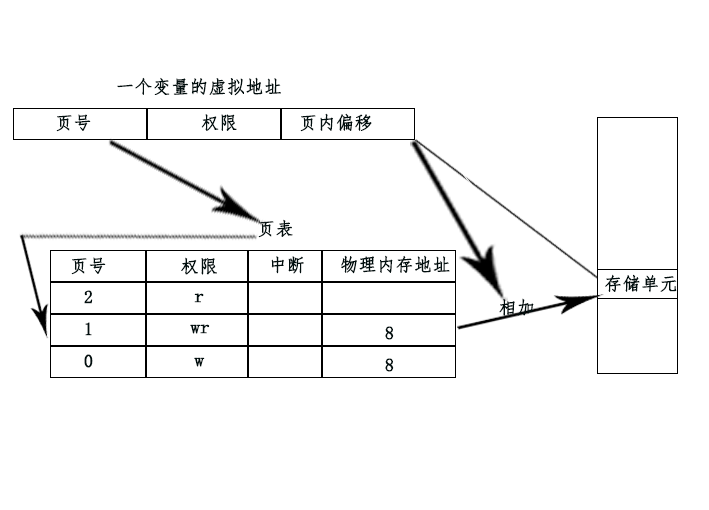
<style>
.page{position:relative;width:709px;height:510px;background:#ffffff}
.page>*{position:absolute;margin:0}
.t1{font:18px "FangSong";color:#010e0e;font-weight:bold}
.t2{font:18px "FangSong";font-weight:bold}
.t3{font:18px "FangSong";color:#010e0e;font-weight:bold;scale:1.03 1}
</style>
<div class="page">
<p class="t1" style="left:117px;top:77px;width:164px;height:19px">一个变量的虚拟地址</p>
<p class="t1" style="left:300px;top:113px;width:72px;height:19px">段内偏移</p>
<p class="t1" style="left:300px;top:113px;width:72px;height:19px">页内偏移</p>
<p class="t1" style="left:56px;top:114px;width:35px;height:18px">页号</p>
<p class="t1" style="left:201px;top:114px;width:36px;height:17px">权限</p>
<p class="t2" style="left:202px;top:114px;width:35px;height:18px">段号</p>
<p class="t1" style="left:258px;top:219px;width:35px;height:19px">页表</p>
<p class="t2" style="left:71px;top:257px;width:35px;height:18px">段号</p>
<p class="t1" style="left:71px;top:257px;width:35px;height:18px">页号</p>
<p class="t3" style="left:181px;top:257px;width:36px;height:18px">权限</p>
<p class="t1" style="left:271px;top:256px;width:33px;height:18px">中断</p>
<p class="t1" style="left:341px;top:255px;width:109px;height:19px">物理内存地址</p>
<p class="t1" style="left:341px;top:255px;width:109px;height:19px">物理内存地址</p>
<p class="t1" style="left:605px;top:274px;width:72px;height:19px">存储单元</p>
<p class="t1" style="left:605px;top:274px;width:72px;height:19px">存储单元</p>
<p class="t1" style="left:84px;top:290px;width:9px;height:14px">2</p>
<p class="t1" style="left:84px;top:290px;width:9px;height:14px">2</p>
<p class="t3" style="left:194px;top:293px;width:10px;height:10px">r</p>
<p class="t1" style="left:499px;top:298px;width:35px;height:18px">相加</p>
<p class="t1" style="left:85px;top:322px;width:7px;height:14px">1</p>
<p class="t1" style="left:85px;top:322px;width:7px;height:14px">1</p>
<p class="t3" style="left:190px;top:324px;width:20px;height:10px">wr</p>
<p class="t1" style="left:385px;top:326px;width:9px;height:14px">8</p>
<p class="t1" style="left:84px;top:354px;width:9px;height:14px">0</p>
<p class="t1" style="left:84px;top:354px;width:9px;height:14px">0</p>
<p class="t3" style="left:194px;top:357px;width:11px;height:10px">w</p>
<p class="t1" style="left:385px;top:358px;width:9px;height:14px">8</p>
</div>
